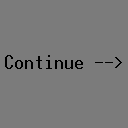
<style>
.page{position:relative;width:128px;height:128px;background:#7b7b7b}
.page>*{position:absolute;margin:0}
.t1{font:18.7px "Terminal";color:#000000}
</style>
<div class="page">
<p class="t1" style="left:5px;top:55px;width:117px;height:14px">Continue --&gt;</p>
</div>
